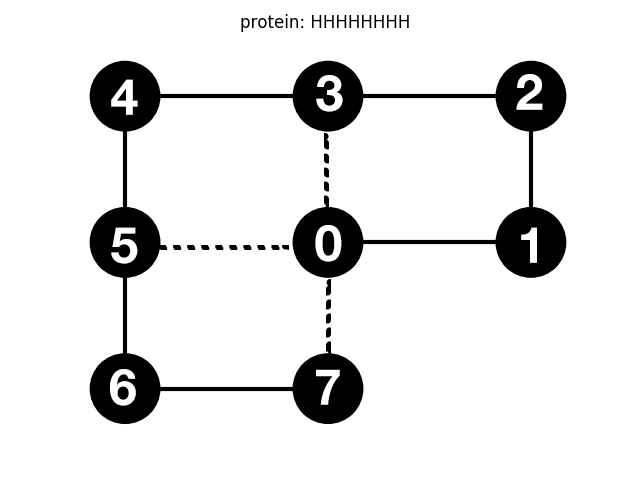
<style>
.page{position:relative;width:640px;height:480px;background:#ffffff}
.page>*{position:absolute;margin:0}
.t1{font:50px "HelveticaNeue-Bold";color:#ffffff}
</style>
<div class="page">
<p class="t1" style="left:316px;top:75px;width:27px;height:37px">3</p>
<p class="t1" style="left:516px;top:74px;width:27px;height:36px">2</p>
<p class="t1" style="left:111px;top:79px;width:27px;height:36px">4</p>
<p class="t1" style="left:111px;top:227px;width:27px;height:37px">5</p>
<p class="t1" style="left:315px;top:225px;width:27px;height:37px">0</p>
<p class="t1" style="left:521px;top:227px;width:16px;height:36px">1</p>
<p class="t1" style="left:110px;top:369px;width:26px;height:37px">6</p>
</div>
